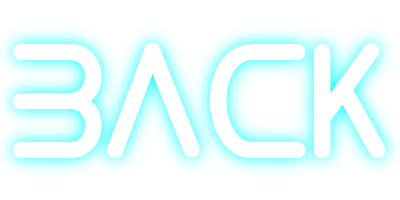
<style>
.page{position:relative;width:400px;height:200px;background:#ffffff}
.page>*{position:absolute;margin:0}
.t1{font:200px "bioliquid-Regular";color:#ffffff}
</style>
<div class="page">
<p class="t1" style="left:13px;top:42px;width:373px;height:116px">Back</p>
</div>
